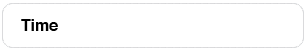
<style>
.page{position:relative;width:306px;height:50px;background:#ffffff}
.page>*{position:absolute;margin:0}
.t1{font:16px "Helvetica-Bold";color:#000000}
</style>
<div class="page">
<p class="t1" style="left:21px;top:19px;width:37px;height:12px">Time</p>
</div>
